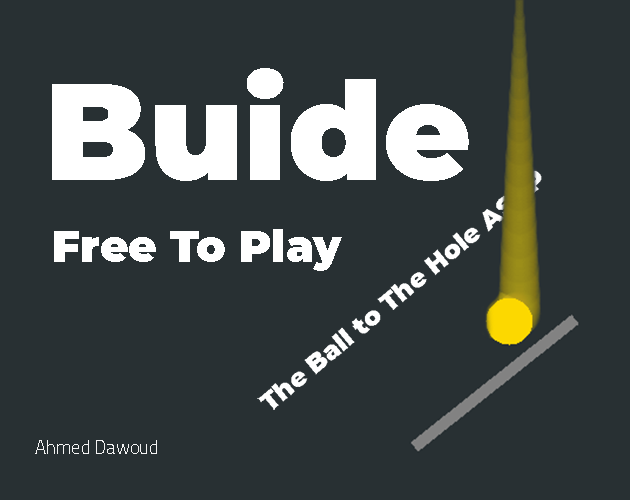
<style>
.page{position:relative;width:630px;height:500px;background:#283033}
.page>*{position:absolute;margin:0}
.t1{font:135.4px "Montserrat-Black";color:#ffffff}
.t2{font:43.8px "Montserrat-Black";color:#ffffff}
.t3{font:18.6px "Cairo-Light";color:#f4f4f4}
</style>
<div class="page">
<p class="t1" style="left:52px;top:68px;width:417px;height:113px">Buide</p>
<p class="t2" style="left:54px;top:229px;width:288px;height:42px">Free To Play</p>
<p class="t3" style="left:35px;top:440px;width:122px;height:14px">Ahmed Dawoud</p>
</div>
